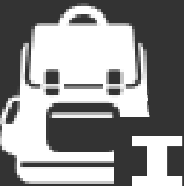
<style>
.page{position:relative;width:184px;height:186px;background:#333333}
.page>*{position:absolute;margin:0}
.t1{font:100px "UpheavalPro-Regular";color:#ffffff}
</style>
<div class="page">
<p class="t1" style="left:132px;top:136px;width:51px;height:50px">I</p>
</div>
